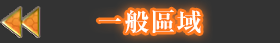
<style>
.page{position:relative;width:280px;height:43px;background:#333333}
.page>*{position:absolute;margin:0}
.t1{font:25px "RyuminPr6N-ExBold";letter-spacing:0.075em;color:#fffffa}
</style>
<div class="page">
<p class="t1" style="left:98px;top:9px;width:103px;height:24px">一般區域</p>
</div>
